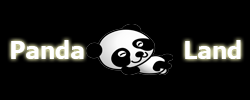
<style>
.page{position:relative;width:250px;height:100px;background:#000000}
.page>*{position:absolute;margin:0}
.t1{font:24px "Tahoma-Bold";color:#ffffff}
.t2{font:24px "Tahoma-Bold";color:#fefefe}
</style>
<div class="page">
<p class="t1" style="left:11px;top:40px;width:73px;height:19px">Panda</p>
<p class="t2" style="left:185px;top:40px;width:56px;height:19px">Land</p>
</div>
